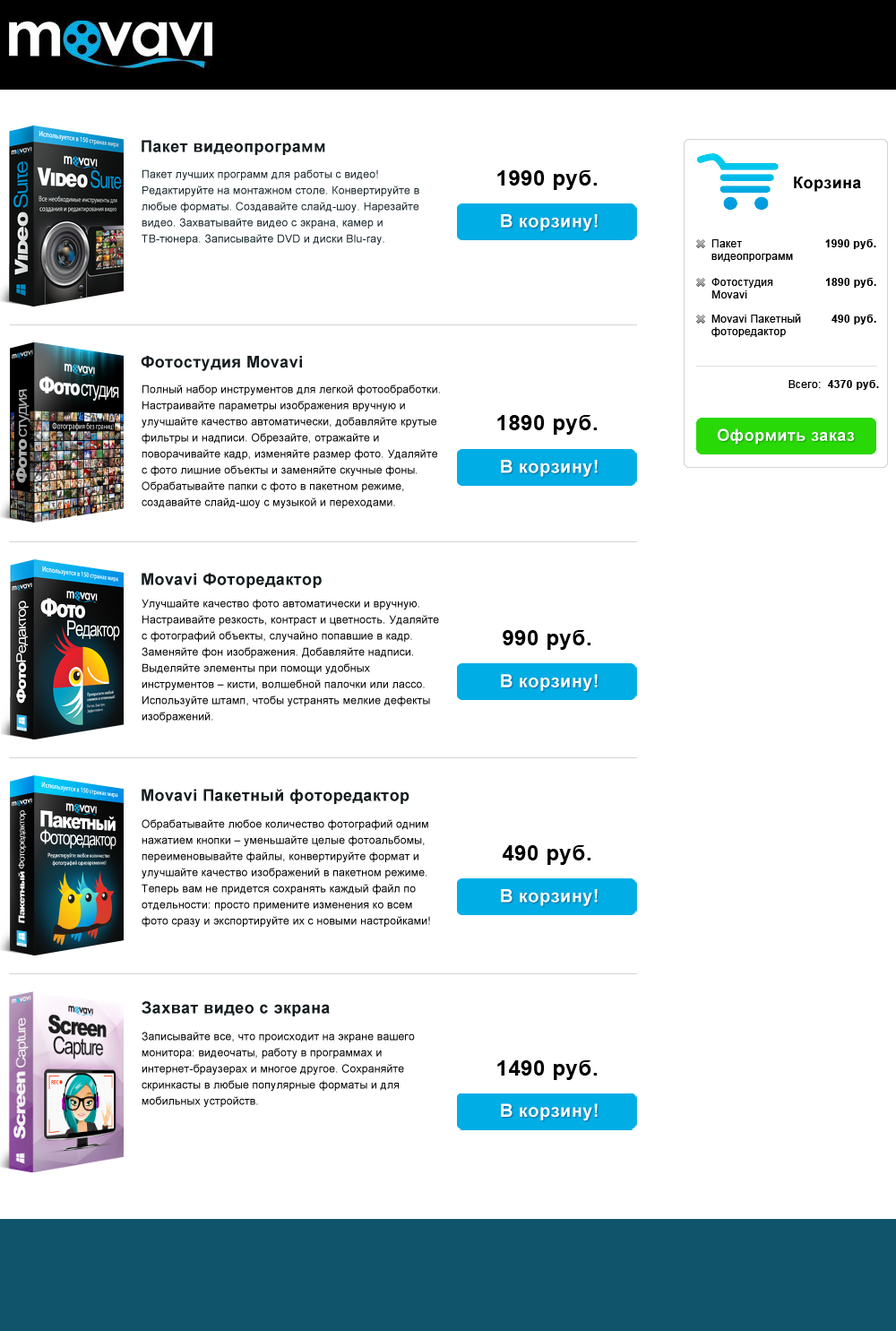
<style>
.page{position:relative;width:896px;height:1331px;background:#ffffff}
.page>*{position:absolute;margin:0}
.t1{font:16.1px "Arial-BoldMT";letter-spacing:0.025em;color:#141c1f}
.t2{font:10.8px/16.1px "ArialMT";letter-spacing:0.025em;color:#142328}
.t3{font:21.5px "Arial-BoldMT";letter-spacing:0.025em;color:#000000}
.t4{font:16.1px "Arial-BoldMT";letter-spacing:0.025em;color:#000000}
.t5{font:17.9px "Arial-BoldMT";letter-spacing:0.025em;color:#ffffff}
.t6{font:10.8px "ArialMT";letter-spacing:0.025em;color:#000000}
.t7{font:10.8px "Arial-BoldMT";letter-spacing:0.025em;color:#000000}
.t8{font:10.8px/16.1px "ArialMT";letter-spacing:0.025em;color:#000101}
.t9{font:16.1px "Arial-BoldMT";letter-spacing:0.025em;color:#ffffff}
.t10{font:10.8px/16.1px "ArialMT";letter-spacing:0.025em;color:#000000}
</style>
<div class="page">
<p class="t1" style="left:142px;top:140px;width:183px;height:15px">Пакет видеопрограмм</p>
<p class="t2" style="left:142px;top:169px;width:277px;height:76px">Пакет лучших программ для работы с видео! Редактируйте на монтажном столе. Конвертируйте в любые форматы. Создавайте слайд-шоу. Нарезайте видео. Захватывайте видео с экрана, камер и <br>ТВ-тюнера. Записывайте DVD и диски Blu-ray.</p>
<p class="t3" style="left:497px;top:170px;width:100px;height:20px">1990 руб.</p>
<p class="t4" style="left:794px;top:177px;width:67px;height:15px">Корзина</p>
<p class="t5" style="left:501px;top:214px;width:97px;height:17px">В корзину!</p>
<p class="t6" style="left:711px;top:239px;width:82px;height:23px">Пакет<br>видеопрограмм</p>
<p class="t7" style="left:825px;top:239px;width:51px;height:10px">1990 руб.</p>
<p class="t6" style="left:711px;top:278px;width:62px;height:20px">Фотостудия <br>Movavi</p>
<p class="t7" style="left:825px;top:278px;width:51px;height:10px">1890 руб.</p>
<p class="t6" style="left:711px;top:314px;width:90px;height:23px">Movavi Пакетный фоторедактор</p>
<p class="t7" style="left:832px;top:315px;width:44px;height:9px">490 руб.</p>
<p class="t1" style="left:141px;top:356px;width:161px;height:15px">Фотостудия Movavi</p>
<p class="t8" style="left:142px;top:384px;width:298px;height:124px">Полный набор инструментов для легкой фотообработки. Настраивайте параметры изображения вручную и улучшайте качество автоматически, добавляйте крутые фильтры и надписи. Обрезайте, отражайте и поворачивайте кадр, изменяйте размер фото. Удаляйте с фото лишние объекты и заменяйте скучные фоны. Обрабатывайте папки с фото в пакетном режиме, создавайте слайд-шоу с музыкой и переходами.</p>
<p class="t7" style="left:789px;top:380px;width:90px;height:10px"><span class="t6">Всего:  </span>4370 руб.</p>
<p class="t3" style="left:497px;top:415px;width:100px;height:20px">1890 руб.</p>
<p class="t9" style="left:718px;top:428px;width:137px;height:16px">Оформить заказ</p>
<p class="t5" style="left:501px;top:460px;width:97px;height:17px">В корзину!</p>
<p class="t1" style="left:142px;top:573px;width:180px;height:15px">Movavi Фоторедактор</p>
<p class="t8" style="left:142px;top:599px;width:297px;height:123px">Улучшайте качество фото автоматически и вручную. Настраивайте резкость, контраст и цветность. Удаляйте с фотографий объекты, случайно попавшие в кадр. Заменяйте фон изображения. Добавляйте надписи. Выделяйте элементы при помощи удобных <br>инструментов – кисти, волшебной палочки или лассо. Используйте штамп, чтобы устранять мелкие дефекты изображений.</p>
<p class="t3" style="left:503px;top:630px;width:88px;height:20px">990 руб.</p>
<p class="t5" style="left:501px;top:674px;width:97px;height:17px">В корзину!</p>
<p class="t1" style="left:142px;top:789px;width:268px;height:15px">Movavi Пакетный фоторедактор</p>
<p class="t10" style="left:142px;top:819px;width:288px;height:108px">Обрабатывайте любое количество фотографий одним нажатием кнопки – уменьшайте целые фотоальбомы, переименовывайте файлы, конвертируйте формат и улучшайте качество изображений в пакетном режиме. Теперь вам не придется сохранять каждый файл по отдельности: просто примените изменения ко всем <br>фото сразу и экспортируйте их с новыми настройками!</p>
<p class="t3" style="left:503px;top:845px;width:88px;height:20px">490 руб.</p>
<p class="t5" style="left:501px;top:889px;width:97px;height:17px">В корзину!</p>
<p class="t1" style="left:142px;top:1001px;width:188px;height:15px">Захват видео с экрана</p>
<p class="t10" style="left:142px;top:1031px;width:273px;height:76px">Записывайте все, что происходит на экране вашего монитора: видеочаты, работу в программах и интернет-браузерах и многое другое. Сохраняйте скринкасты в любые популярные форматы и для мобильных устройств.</p>
<p class="t3" style="left:497px;top:1060px;width:100px;height:20px">1490 руб.</p>
<p class="t5" style="left:501px;top:1103px;width:97px;height:18px">В корзину!</p>
</div>
